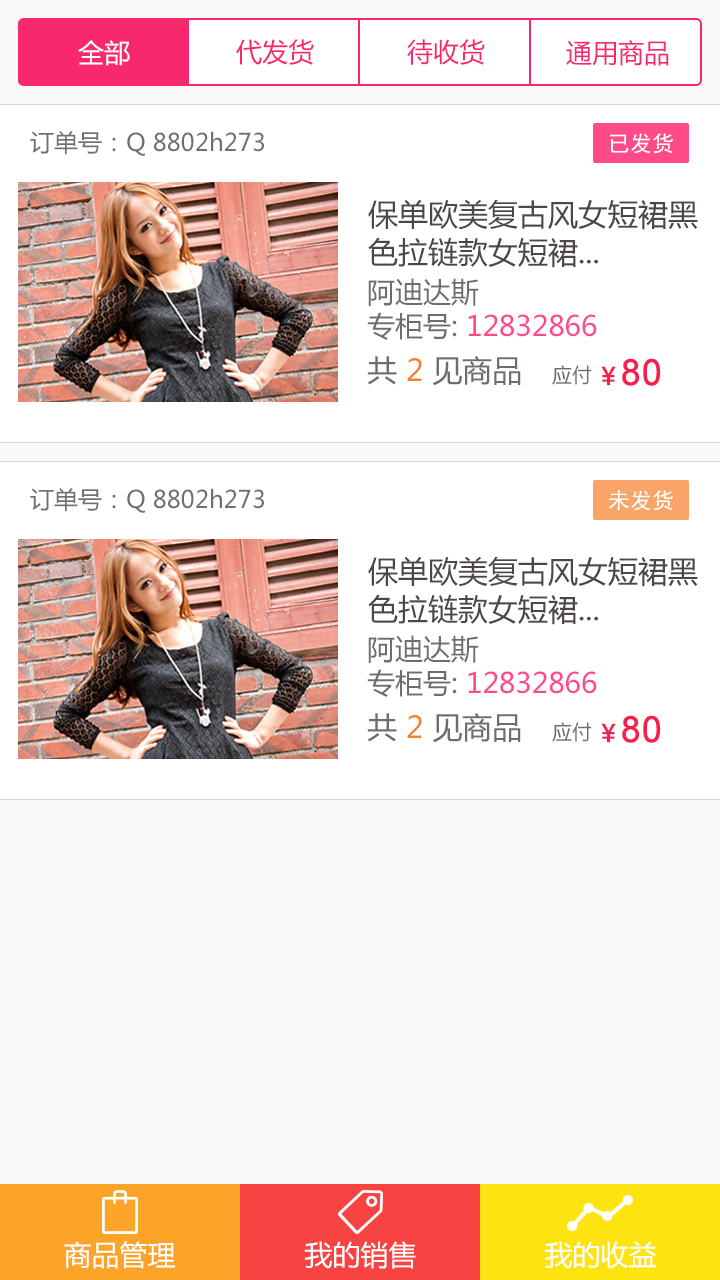
<style>
.page{position:relative;width:720px;height:1280px;background:#ffffff}
.page>*{position:absolute;margin:0}
.t1{font:26px "MicrosoftYaHei";color:#ffffff}
.t2{font:26px "MicrosoftYaHei";color:#f7286d}
.t3{font:24px "MicrosoftYaHei";color:#707070}
.t4{font:22px "SimHei";color:#ffffff}
.t5{font:30px/38px "MicrosoftYaHei";color:#4c454c}
.t6{font:28px/34px "MicrosoftYaHei";color:#716b6f}
.t7{font:28px/34px "MicrosoftYaHei";color:#ff4b88}
.t8{font:30px "MicrosoftYaHei";color:#716b6f}
.t9{font:30px "MicrosoftYaHei";color:#f7812e}
.t10{font:20px "MicrosoftYaHei";color:#716b6f}
.t11{font:36px "ArialMT";color:#f71f4d;font-weight:bold}
.t12{font:24px "MicrosoftYaHei";color:#f71f4d;font-weight:bold}
.t13{font:28px "MicrosoftYaHei";color:#ffffff}
</style>
<div class="page">
<p class="t1" style="left:78px;top:40px;width:52px;height:26px">全部</p>
<p class="t2" style="left:236px;top:39px;width:78px;height:26px">代发货</p>
<p class="t2" style="left:407px;top:39px;width:78px;height:26px">待收货</p>
<p class="t2" style="left:566px;top:40px;width:103px;height:26px">通用商品</p>
<p class="t3" style="left:30px;top:131px;width:234px;height:25px">订单号：Q 8802h273</p>
<p class="t4" style="left:610px;top:133px;width:63px;height:21px">已发货</p>
<p class="t5" style="left:368px;top:199px;width:330px;height:69px">保单欧美复古风女短裙黑<br>色拉链款女短裙...</p>
<p class="t6" style="left:367px;top:278px;width:230px;height:62px">阿迪达斯<br>专柜号: <span class="t7">12832866</span></p>
<p class="t8" style="left:367px;top:356px;width:154px;height:30px">共<span class="t9"> 2 </span>见商品</p>
<p class="t10" style="left:552px;top:365px;width:40px;height:20px">应付</p>
<p class="t11" style="left:601px;top:358px;width:60px;height:28px"><span class="t12">￥</span>80</p>
<p class="t3" style="left:30px;top:488px;width:234px;height:25px">订单号：Q 8802h273</p>
<p class="t4" style="left:609px;top:490px;width:64px;height:21px">未发货</p>
<p class="t5" style="left:368px;top:556px;width:330px;height:69px">保单欧美复古风女短裙黑<br>色拉链款女短裙...</p>
<p class="t6" style="left:367px;top:635px;width:230px;height:62px">阿迪达斯<br>专柜号: <span class="t7">12832866</span></p>
<p class="t8" style="left:367px;top:713px;width:154px;height:30px">共<span class="t9"> 2 </span>见商品</p>
<p class="t10" style="left:552px;top:722px;width:40px;height:20px">应付</p>
<p class="t11" style="left:601px;top:715px;width:60px;height:28px"><span class="t12">￥</span>80</p>
<p class="t13" style="left:64px;top:1241px;width:111px;height:28px">商品管理</p>
<p class="t13" style="left:304px;top:1241px;width:112px;height:28px">我的销售</p>
<p class="t13" style="left:544px;top:1241px;width:112px;height:28px">我的收益</p>
</div>
